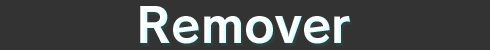
<style>
.page{position:relative;width:490px;height:50px;background:#333333}
.page>*{position:absolute;margin:0}
.t1{font:48px "RodinPro-B";color:#fffeff}
</style>
<div class="page">
<p class="t1" style="left:140px;top:6px;width:210px;height:38px">Remover</p>
</div>
